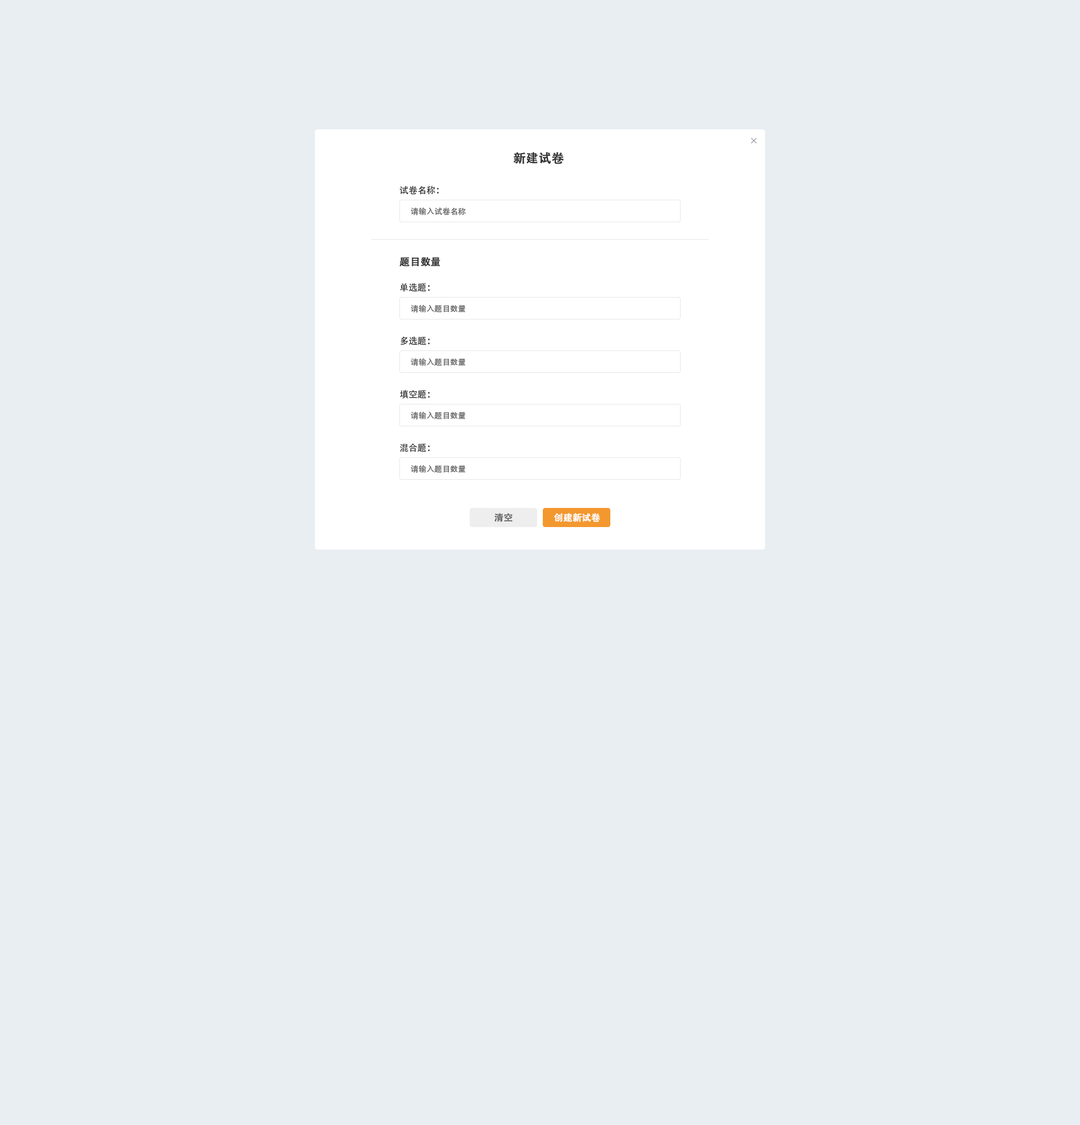
<style>
.page{position:relative;width:1080px;height:1125px;background:#e9eef3}
.page>*{position:absolute;margin:0}
.t1{font:12.4px "AdobeHeitiStd-Regular";color:#333333;font-weight:bold}
.t2{font:9px "AdobeHeitiStd-Regular";color:#333333}
.t3{font:7.9px "AdobeHeitiStd-Regular";color:#666666}
.t4{font:10.1px "AdobeHeitiStd-Regular";color:#333333;font-weight:bold}
.t5{font:9px "AdobeHeitiStd-Regular";color:#666666;font-weight:bold}
.t6{font:9px "AdobeHeitiStd-Regular";color:#ffffff;font-weight:bold}
</style>
<div class="page">
<p class="t1" style="left:513px;top:152px;width:51px;height:12px">新建试卷</p>
<p class="t2" style="left:399px;top:186px;width:40px;height:9px">试卷名称：</p>
<p class="t3" style="left:411px;top:208px;width:55px;height:7px">请输入试卷名称</p>
<p class="t4" style="left:399px;top:257px;width:41px;height:10px">题目数量</p>
<p class="t2" style="left:400px;top:283px;width:30px;height:9px">单选题：</p>
<p class="t3" style="left:411px;top:305px;width:55px;height:8px">请输入题目数量</p>
<p class="t2" style="left:400px;top:336px;width:30px;height:9px">多选题：</p>
<p class="t3" style="left:411px;top:358px;width:55px;height:8px">请输入题目数量</p>
<p class="t2" style="left:400px;top:390px;width:30px;height:9px">填空题：</p>
<p class="t3" style="left:411px;top:412px;width:55px;height:8px">请输入题目数量</p>
<p class="t2" style="left:400px;top:443px;width:30px;height:9px">混合题：</p>
<p class="t3" style="left:411px;top:465px;width:55px;height:8px">请输入题目数量</p>
<p class="t5" style="left:494px;top:513px;width:18px;height:9px">清空</p>
<p class="t6" style="left:554px;top:513px;width:46px;height:9px">创建新试卷</p>
</div>
